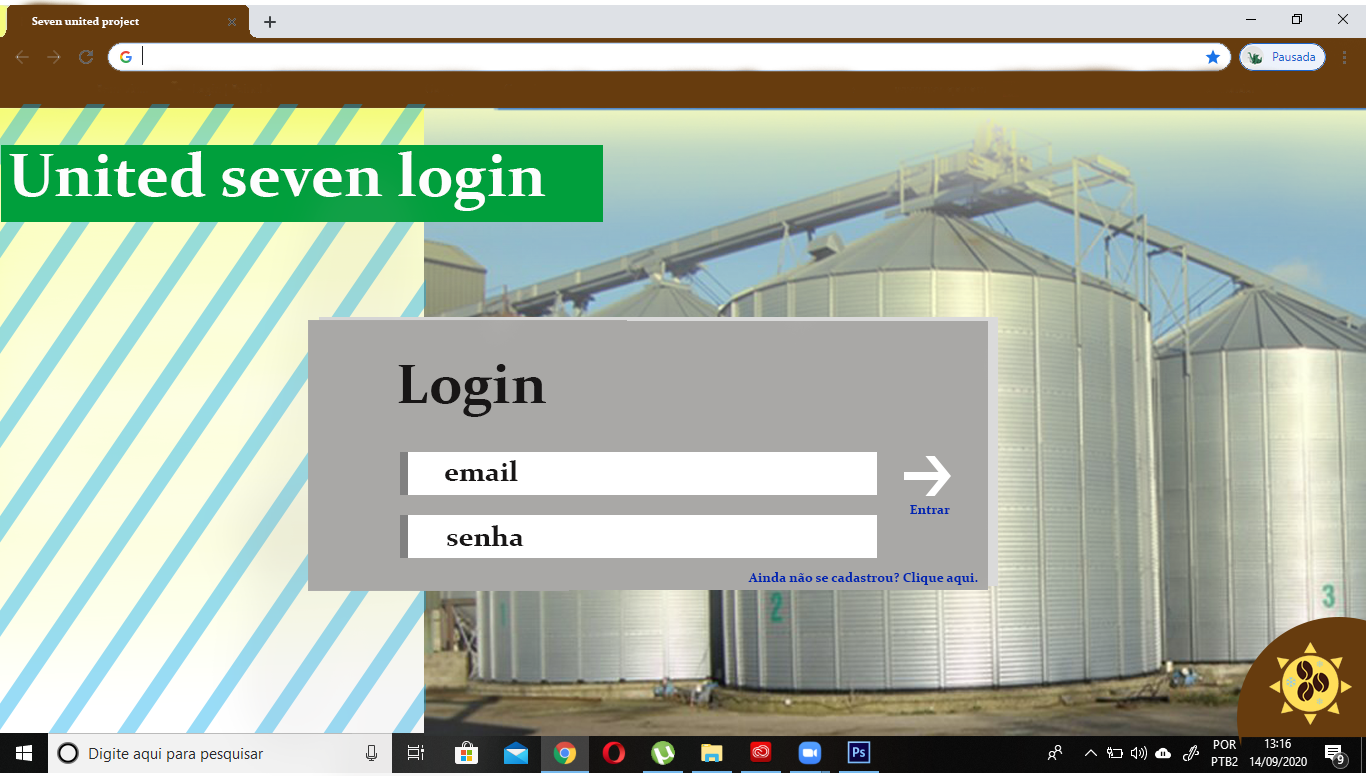
<style>
.page{position:relative;width:1366px;height:776px}
.page>*{position:absolute;margin:0}
.t1{font:11.1px "Constantia-Bold";color:#fdfdfd}
.t2{font:61.1px "Constantia-Bold";color:#fdfdfd}
.t3{font:55.6px "Constantia-Bold";color:#181616}
.t4{font:27.8px "Constantia-Bold";color:#181616}
.t5{font:13.3px "Constantia-Bold";color:#0025b1}
</style>
<div class="page">
<p class="t1" style="left:32px;top:17px;width:107px;height:11px">Seven united project</p>
<p class="t2" style="left:9px;top:151px;width:537px;height:60px">United seven login</p>
<p class="t3" style="left:398px;top:364px;width:148px;height:53px">Login</p>
<p class="t4" style="left:445px;top:460px;width:73px;height:21px">email</p>
<p class="t5" style="left:910px;top:505px;width:40px;height:9px">Entrar</p>
<p class="t4" style="left:447px;top:525px;width:77px;height:21px">senha</p>
<p class="t5" style="left:748px;top:572px;width:230px;height:13px">Ainda não se cadastrou? Clique aqui.</p>
</div>
